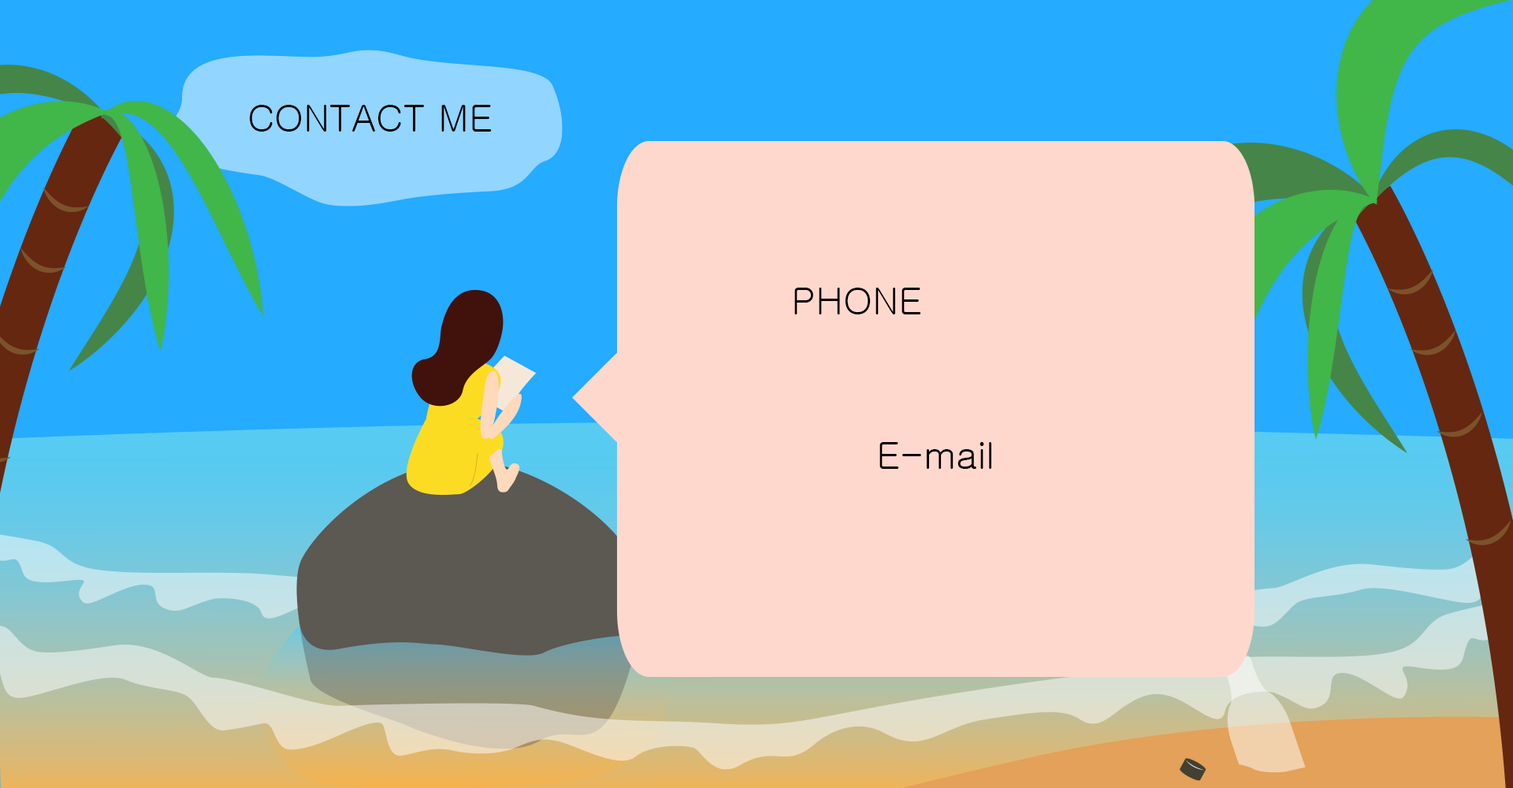
<style>
.page{position:relative;width:1513px;height:788px;background:#ffd8cd}
.page>*{position:absolute;margin:0}
.t1{font:37.8px "Gulim";color:#000000}
</style>
<div class="page">
<p class="t1" style="left:249px;top:105px;width:243px;height:27px">CONTACT ME</p>
<p class="t1" style="left:794px;top:288px;width:127px;height:26px">PHONE</p>
<p class="t1" style="left:879px;top:442px;width:112px;height:27px">E-mail</p>
</div>
